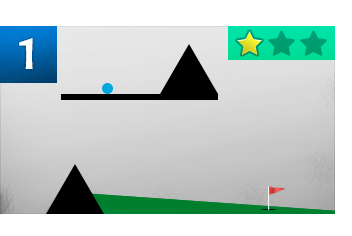
<style>
.page{position:relative;width:352px;height:236px;background:#ffffff}
.page>*{position:absolute;margin:0}
.t1{font:47.8px "Acme-Regular";color:#ffffff}
</style>
<div class="page">
<p class="t1" style="left:19px;top:38px;width:14px;height:31px">1</p>
</div>
